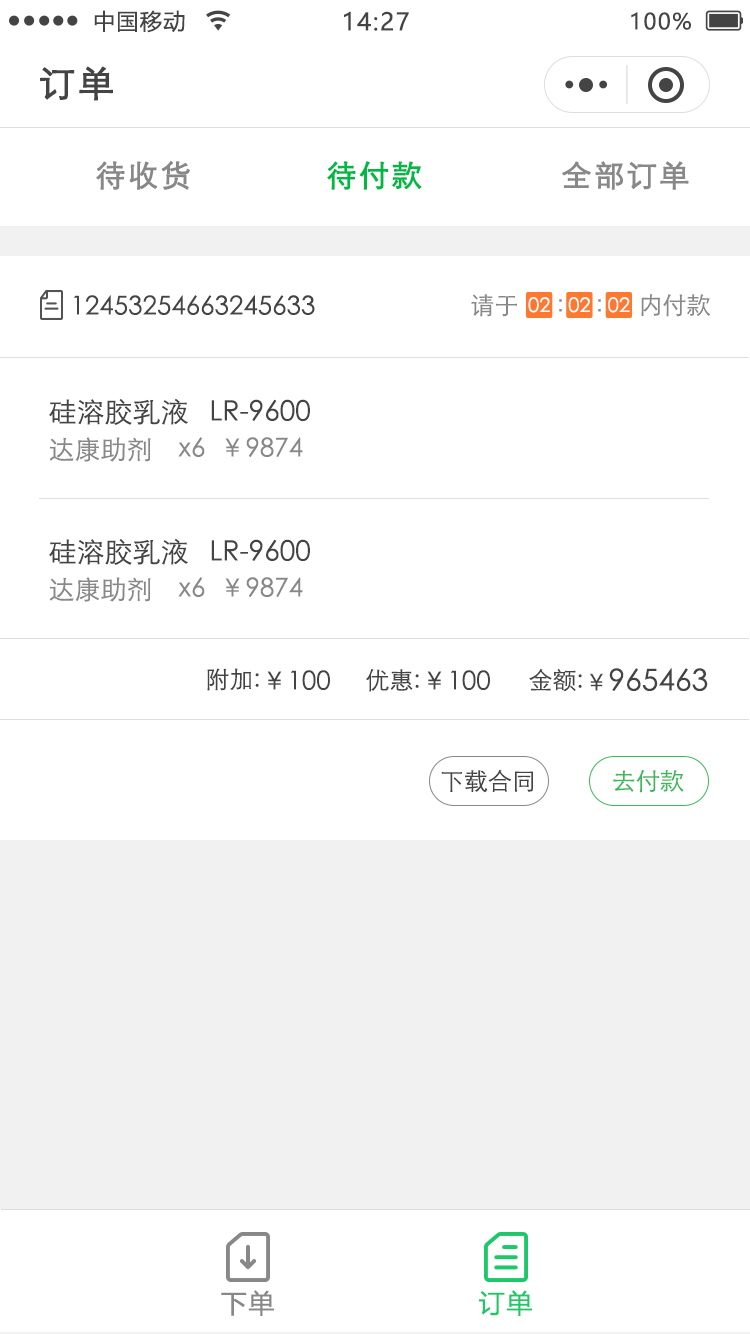
<style>
.page{position:relative;width:750px;height:1334px;background:#ffffff}
.page>*{position:absolute;margin:0}
.t1{font:22px "MicrosoftYaHei";letter-spacing:0.06em;color:#444444}
.t2{font:24px "MicrosoftYaHei";letter-spacing:0.06em;color:#444444}
.t3{font:36px "STXihei";letter-spacing:0.06em;color:#444444;font-weight:bold}
.t4{font:30px "STXihei";letter-spacing:0.06em;color:#888888;font-weight:bold}
.t5{font:30px "STXihei";letter-spacing:0.06em;color:#00b945;font-weight:bold}
.t6{font:24px "STXihei";color:#888888}
.t7{font:26px "STXihei";color:#444444}
.t8{font:20px "STXihei";color:#ffffff}
.t9{font:28px "STXihei";color:#444444}
.t10{font:26px "STXihei";color:#888888}
.t11{font:24px "STXihei";color:#444444}
.t12{font:30px "STXihei";color:#444444}
.t13{font:24px "STXihei";color:#3db858}
.t14{font:26px "MicrosoftYaHeiUI";letter-spacing:0.06em;color:#888888}
.t15{font:26px "MicrosoftYaHeiUI";letter-spacing:0.06em;color:#1dc869}
</style>
<div class="page">
<p class="t1" style="left:94px;top:10px;width:91px;height:23px">中国移动</p>
<p class="t2" style="left:344px;top:11px;width:65px;height:20px">14:27</p>
<p class="t1" style="left:631px;top:12px;width:60px;height:18px">100%</p>
<p class="t3" style="left:40px;top:66px;width:73px;height:35px">订单</p>
<p class="t4" style="left:96px;top:161px;width:94px;height:29px">待收货</p>
<p class="t5" style="left:327px;top:161px;width:95px;height:29px">待付款</p>
<p class="t4" style="left:562px;top:161px;width:127px;height:29px">全部订单</p>
<p class="t6" style="left:471px;top:294px;width:46px;height:23px">请于</p>
<p class="t6" style="left:641px;top:294px;width:69px;height:23px">内付款</p>
<p class="t7" style="left:74px;top:295px;width:241px;height:20px">12453254663245633</p>
<p class="t8" style="left:528px;top:297px;width:22px;height:16px">02</p>
<p class="t6" style="left:559px;top:299px;width:3px;height:13px">：</p>
<p class="t8" style="left:568px;top:297px;width:22px;height:16px">02</p>
<p class="t6" style="left:598px;top:299px;width:3px;height:13px">：</p>
<p class="t8" style="left:608px;top:297px;width:22px;height:16px">02</p>
<p class="t9" style="left:49px;top:398px;width:261px;height:27px">硅溶胶乳液   LR-9600</p>
<p class="t10" style="left:49px;top:437px;width:102px;height:25px">达康助剂</p>
<p class="t10" style="left:178px;top:437px;width:27px;height:20px">x6</p>
<p class="t10" style="left:225px;top:437px;width:78px;height:20px">￥9874</p>
<p class="t9" style="left:49px;top:538px;width:261px;height:27px">硅溶胶乳液   LR-9600</p>
<p class="t10" style="left:49px;top:577px;width:102px;height:25px">达康助剂</p>
<p class="t10" style="left:178px;top:577px;width:27px;height:20px">x6</p>
<p class="t10" style="left:225px;top:577px;width:78px;height:20px">￥9874</p>
<p class="t11" style="left:207px;top:668px;width:52px;height:23px">附加:</p>
<p class="t7" style="left:267px;top:670px;width:63px;height:20px">￥100</p>
<p class="t11" style="left:366px;top:669px;width:53px;height:23px">优惠:</p>
<p class="t7" style="left:427px;top:670px;width:63px;height:20px">￥100</p>
<p class="t11" style="left:529px;top:668px;width:53px;height:24px">金额:</p>
<p class="t12" style="left:590px;top:668px;width:118px;height:23px"><span class="t11">￥</span>965463</p>
<p class="t11" style="left:441px;top:769px;width:92px;height:24px">下载合同</p>
<p class="t13" style="left:613px;top:770px;width:71px;height:23px">去付款</p>
<p class="t14" style="left:221px;top:1290px;width:53px;height:26px">下单</p>
<p class="t15" style="left:479px;top:1290px;width:53px;height:26px">订单</p>
</div>
